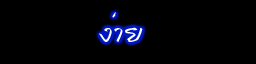
<style>
.page{position:relative;width:256px;height:64px;background:#000000}
.page>*{position:absolute;margin:0}
.t1{font:36px "DsSupasawatD";color:#ffffff}
</style>
<div class="page">
<p class="t1" style="left:99px;top:12px;width:44px;height:30px">§èÒÂ</p>
</div>
